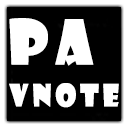
<style>
.page{position:relative;width:128px;height:128px;background:#000000}
.page>*{position:absolute;margin:0}
.t1{font:60px "ShowcardGothic-Reg";letter-spacing:0.1em;color:#ffffff;font-weight:bold}
.t2{font:30px "ShowcardGothic-Reg";letter-spacing:0.1em;color:#ffffff;font-weight:bold}
</style>
<div class="page">
<p class="t1" style="left:9px;top:18px;width:85px;height:48px">PA</p>
<p class="t2" style="left:9px;top:83px;width:110px;height:25px">VNote</p>
</div>
